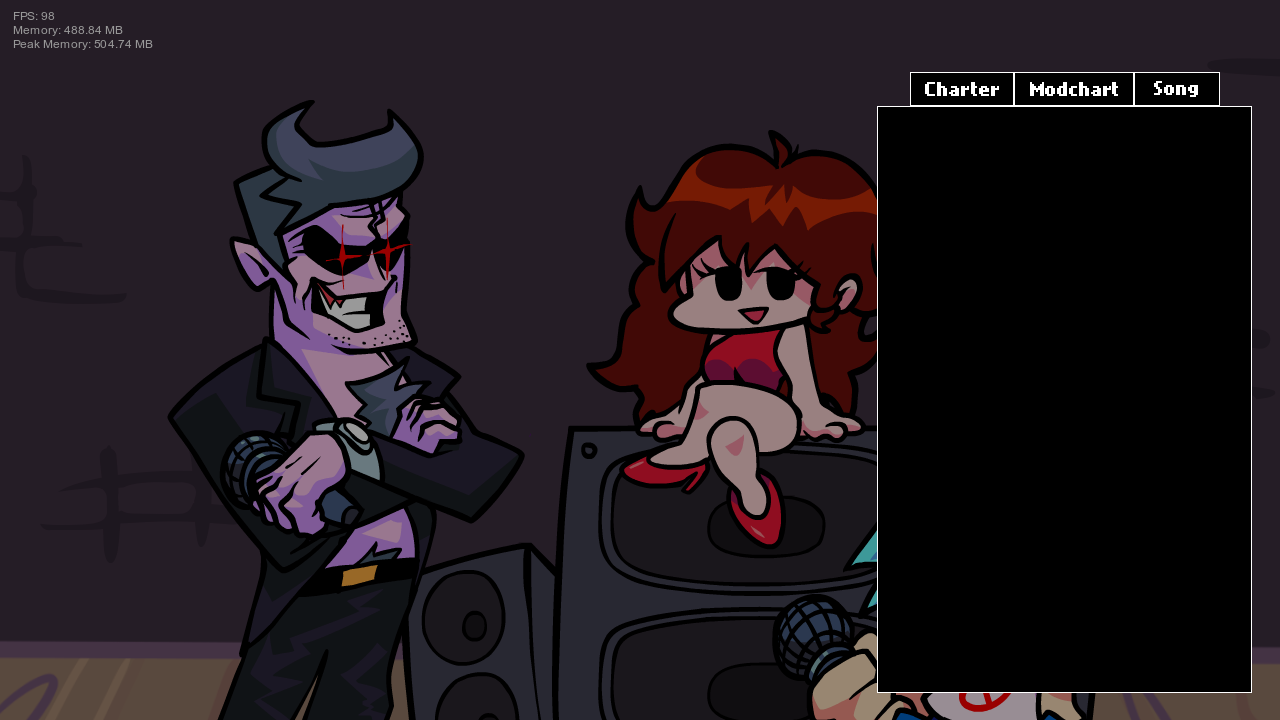
<style>
.page{position:relative;width:1280px;height:720px;background:#251d26}
.page>*{position:absolute;margin:0}
.t1{font:16px "NokiaCellphoneFC-Small";color:#ffffff}
</style>
<div class="page">
<p class="t1" style="left:925px;top:82px;width:74px;height:14px">Charter</p>
<p class="t1" style="left:1030px;top:82px;width:88px;height:14px">Modchart</p>
<p class="t1" style="left:1154px;top:81px;width:44px;height:16px">Song</p>
</div>
